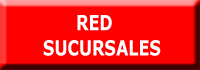
<style>
.page{position:relative;width:200px;height:70px;background:#ff0000}
.page>*{position:absolute;margin:0}
.t1{font:21px "Verdana-Bold";color:#ffffff;scale:0.76 1}
</style>
<div class="page">
<p class="t1" style="left:43px;top:15px;width:118px;height:41px">RED<br>   SUCURSALES</p>
</div>
